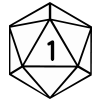
<style>
.page{position:relative;width:100px;height:100px;background:#fdfdfd}
.page>*{position:absolute;margin:0}
.t1{font:29.7px "QuicksandBold-Regular";color:#000000}
</style>
<div class="page">
<p class="t1" style="left:47px;top:40px;width:8px;height:21px">1</p>
</div>
